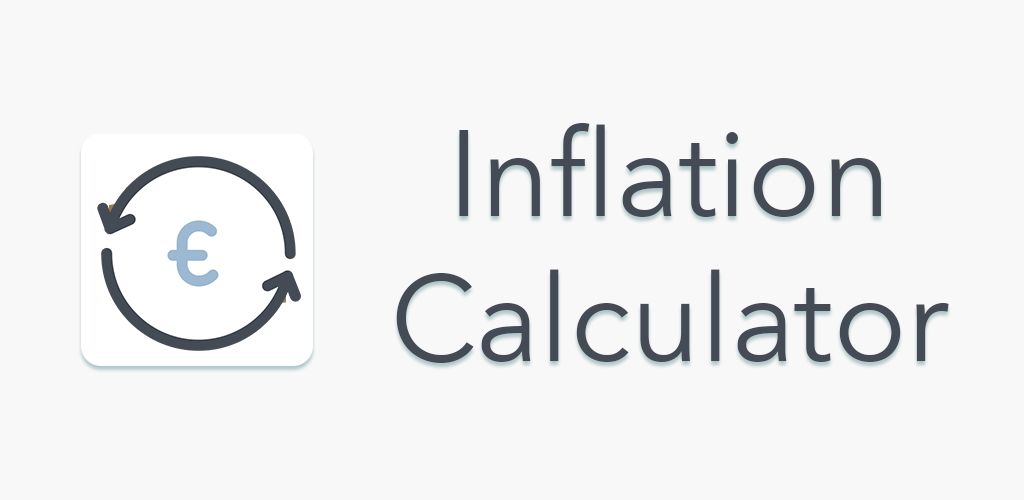
<style>
.page{position:relative;width:1024px;height:500px;background:#f8f8f8}
.page>*{position:absolute;margin:0}
.t1{font:120.8px "AvenirNext-Regular";color:#444b54}
</style>
<div class="page">
<p class="t1" style="left:396px;top:123px;width:553px;height:240px;text-align:center">Inflation Calculator</p>
</div>
